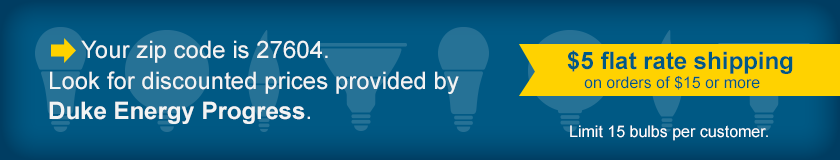
<style>
.page{position:relative;width:840px;height:160px;background:#005984}
.page>*{position:absolute;margin:0}
.t1{font:24px "ArialMT";color:#f2f4f4}
.t2{font:24px "Arial-BoldMT";color:#005984}
.t3{font:24px/20px "ArialMT";color:#f2f4f4}
.t4{font:24px/20px "Arial-BoldMT";color:#f2f4f4}
.t5{font:16px "ArialMT";color:#005984}
.t6{font:16px "ArialMT";color:#ffffff}
</style>
<div class="page">
<p class="t1" style="left:81px;top:40px;width:247px;height:23px">Your zip code is 27604.</p>
<p class="t2" style="left:567px;top:50px;width:226px;height:24px">$5 flat rate shipping</p>
<p class="t3" style="left:49px;top:71px;width:410px;height:53px">Look for discounted prices provided by<br><span class="t4">Duke Energy Progress</span>.</p>
<p class="t5" style="left:584px;top:76px;width:176px;height:14px">on orders of $15 or more</p>
<p class="t6" style="left:570px;top:125px;width:198px;height:16px">Limit 15 bulbs per customer.</p>
</div>
